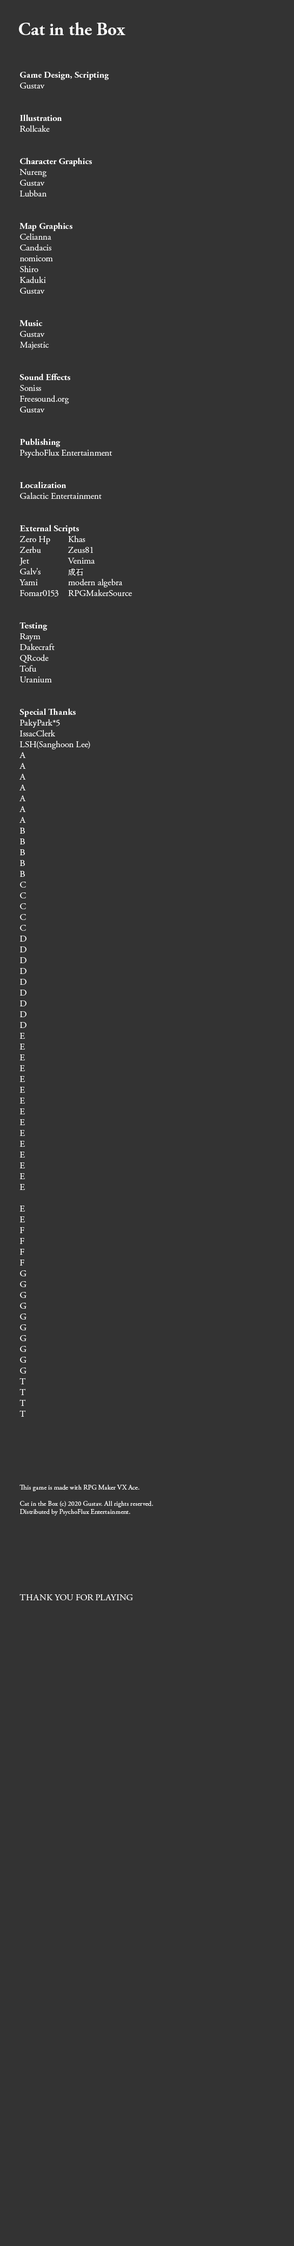
<style>
.page{position:relative;width:294px;height:2246px;background:#333333}
.page>*{position:absolute;margin:0}
.t1{font:18px "AGaramondPro-Bold";color:#ffffff}
.t2{font:9px "AGaramondPro-Regular";color:#ffffff}
.t3{font:9px "AGaramondPro-Bold";color:#ffffff}
.t4{font:6.8px "AGaramondPro-Regular";color:#ffffff}
.t5{font:9px "AGaramondPro-Regular";color:#000000}
.t6{font:7.9px "NotoSerifCJKkr-Regular";color:#ffffff}
</style>
<div class="page">
<p class="t1" style="left:19px;top:22px;width:106px;height:13px">Cat in the Box</p>
<p class="t2" style="left:19px;top:72px;width:134px;height:1529px"><span class="t3">Game Design, Scripting<br></span>Gustav<br><br><br><span class="t3">Illustration<br></span>Rollcake<br><br><br><span class="t3">Character Graphics<br></span>Nureng<br>Gustav<br>Lubban<br><br><br><span class="t3">Map Graphics<br></span>Celianna<br>Candacis<br>nomicom<br>Shiro<br>Kaduki<br>Gustav<br><br><br><span class="t3">Music<br></span>Gustav<br>Majestic<br><br><br><span class="t3">Sound Effects<br></span>Soniss<br>Freesound.org<br>Gustav<br><br><br><span class="t3">Publishing<br></span>PsychoFlux Entertainment<br><br><br><span class="t3">Localization<br></span>Galactic Entertainment<br><br><br><span class="t3">External Scripts<br></span>Zero Hp<br>Zerbu<br>Jet<br>Galv's<br>Yami<br>Fomar0153<br><br><br><span class="t3">Testing<br></span>Raym<br>Dakecraft<br>QRcode<br>Tofu<br>Uranium<br><br><br><span class="t3">Special Thanks<br></span>PakyPark*5<br>IssacClerk<br>LSH(Sanghoon Lee)<br>A<br>A<br>A<br>A<br>A<br>A<br>A<br>B<br>B<br>B<br>B<br>B<br>C<br>C<br>C<br>C<br>C<br>D<br>D<br>D<br>D<br>D<br>D<br>D<br>D<br>D<br>E<br>E<br>E<br>E<br>E<br>E<br>E<br>E<br>E<br>E<br>E<br>E<br>E<br>E<br>E<br><br>E<br>E<br>F<br>F<br>F<br>F<br>G<br>G<br>G<br>G<br>G<br>G<br>G<br>G<br>G<br>G<br>T<br>T<br>T<br>T<br><br><br><br><br><br><br><span class="t4">This game is made with RPG Maker VX Ace.<br><br>Cat in the Box (c) 2020 Gustav. All rights reserved.<br>Distributed by PsychoFlux Entertainment.<br></span><br><br><br><br><br><br><br>THANK YOU FOR PLAYING</p>
<p class="t2" style="left:68px;top:536px;width:64px;height:61px">Khas<br>Zeus81<br>Venima<br><span class="t5">123<br></span>modern algebra<br>RPGMakerSource</p>
<p class="t6" style="left:68px;top:569px;width:15px;height:7px">成石</p>
</div>
